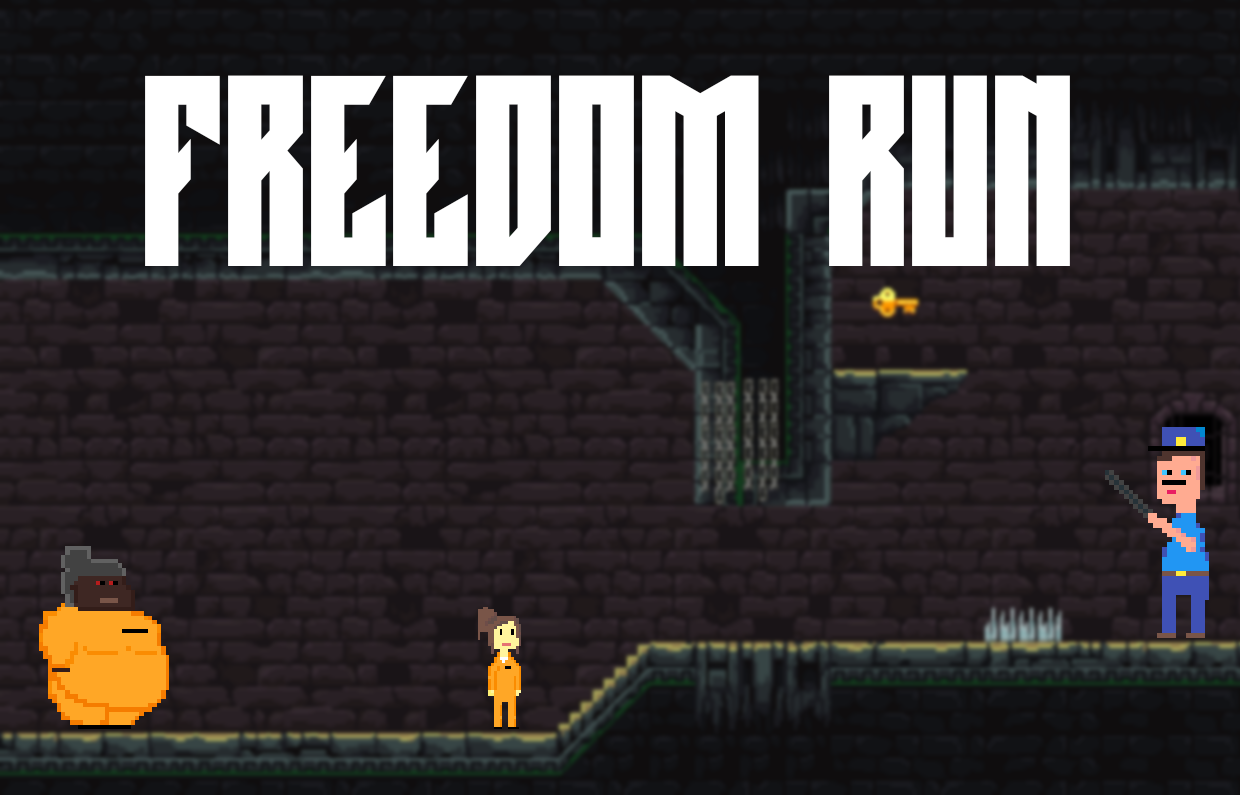
<style>
.page{position:relative;width:1240px;height:795px}
.page>*{position:absolute;margin:0}
.t1{font:236.9px "BlackMustang";color:#ffffff;scale:0.87 1}
</style>
<div class="page">
<p class="t1" style="left:145px;top:75px;width:925px;height:191px">Freedom RUN</p>
</div>
